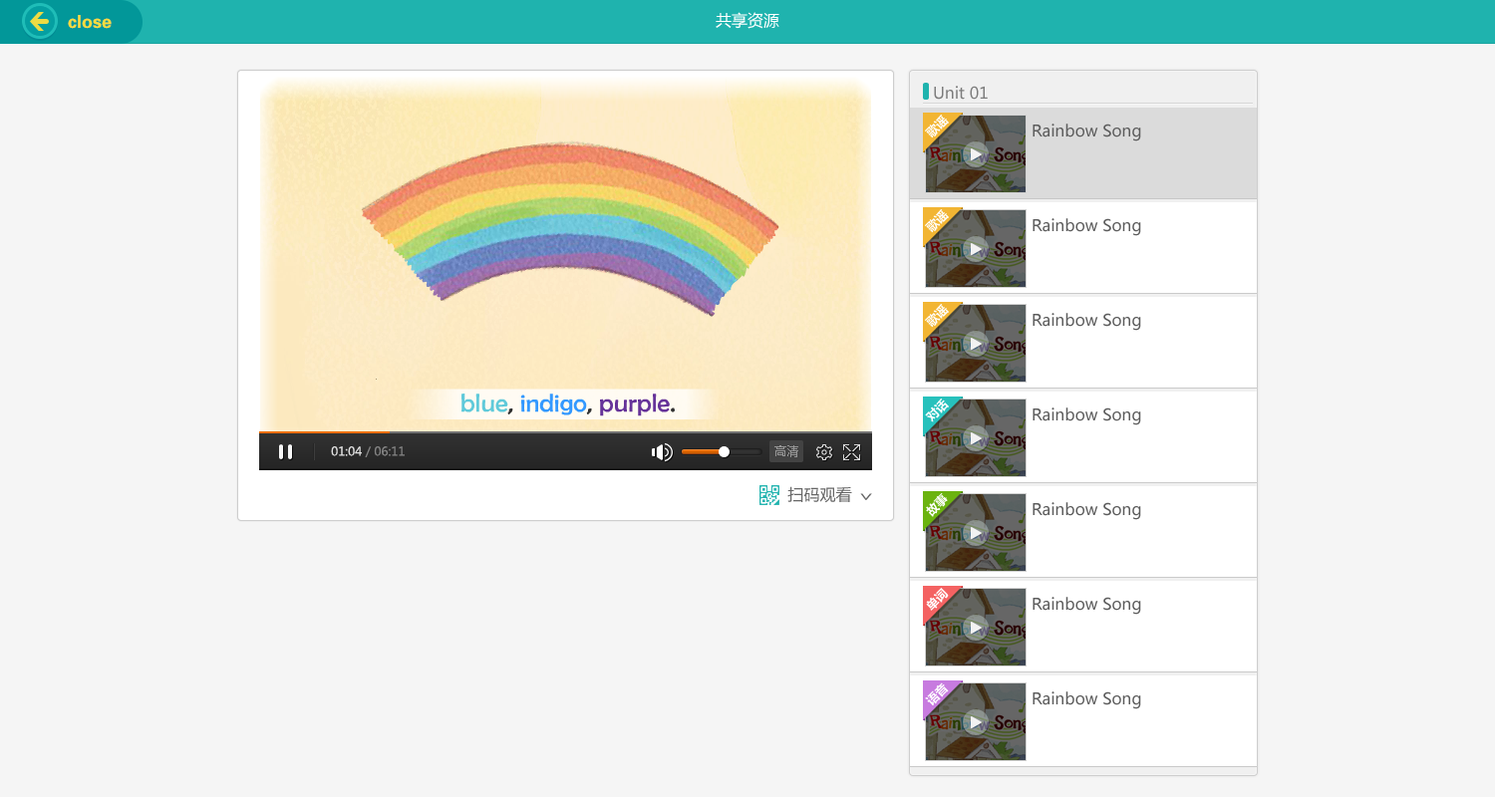
<style>
.page{position:relative;width:1495px;height:797px;background:#f5f5f5}
.page>*{position:absolute;margin:0}
.t1{font:15.9px "MicrosoftYaHei";color:#ffffff}
.t2{font:15.9px "MicrosoftYaHei";color:#7c7c7c}
.t3{font:12px "MicrosoftYaHei-Bold";color:#ffffff}
.t4{font:15.9px "MicrosoftYaHei";color:#5c5c5c}
.t5{font:12px "MicrosoftYaHei";color:#848484}
.t6{font:12px "MicrosoftYaHei";color:#e0e0e0}
.t7{font:12px "MicrosoftYaHei";color:#979797}
.t8{font:15.9px "MicrosoftYaHei";color:#666666}
.t9{font:22px "MicrosoftYaHei";color:#666666;scale:0.63 1}
</style>
<div class="page">
<p class="t1" style="left:716px;top:12px;width:64px;height:17px">共享资源</p>
<p class="t2" style="left:934px;top:86px;width:54px;height:14px">Unit 01</p>
<p class="t3" style="left:925px;top:115px;width:24px;height:24px;rotate:-45deg">歌谣</p>
<p class="t4" style="left:1033px;top:124px;width:108px;height:18px">Rainbow Song</p>
<p class="t3" style="left:925px;top:209px;width:24px;height:24px;rotate:-45deg">歌谣</p>
<p class="t4" style="left:1033px;top:218px;width:108px;height:18px">Rainbow Song</p>
<p class="t3" style="left:925px;top:304px;width:24px;height:24px;rotate:-45deg">歌谣</p>
<p class="t4" style="left:1033px;top:313px;width:108px;height:18px">Rainbow Song</p>
<p class="t3" style="left:925px;top:399px;width:24px;height:24px;rotate:-45deg">对话</p>
<p class="t4" style="left:1033px;top:408px;width:108px;height:18px">Rainbow Song</p>
<p class="t5" style="left:331px;top:447px;width:74px;height:11px"><span class="t6">01:04 </span>/ 06:11</p>
<p class="t7" style="left:775px;top:446px;width:23px;height:12px">高清</p>
<p class="t8" style="left:788px;top:486px;width:64px;height:17px">扫码观看</p>
<p class="t9" style="left:860px;top:493px;width:12px;height:7px;rotate:90deg">&gt;</p>
<p class="t3" style="left:926px;top:493px;width:22px;height:24px;rotate:-45deg">故事</p>
<p class="t4" style="left:1033px;top:502px;width:108px;height:18px">Rainbow Song</p>
<p class="t3" style="left:926px;top:588px;width:23px;height:23px;rotate:-45deg">单词</p>
<p class="t4" style="left:1033px;top:597px;width:108px;height:18px">Rainbow Song</p>
<p class="t3" style="left:925px;top:683px;width:24px;height:23px;rotate:-45deg">语音</p>
<p class="t4" style="left:1033px;top:692px;width:108px;height:18px">Rainbow Song</p>
</div>
